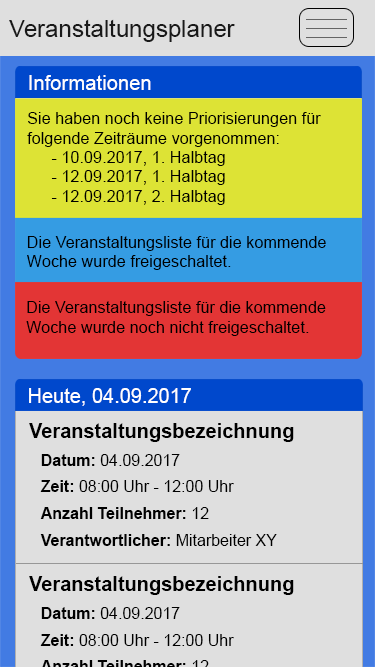
<style>
.page{position:relative;width:375px;height:667px;background:#dfdfdf}
.page>*{position:absolute;margin:0}
.t1{font:24px "ArialMT";color:#191919}
.t2{font:20.3px "ArialMT";color:#ffffff}
.t3{font:16.2px "ArialMT";color:#000000}
.t4{font:20px "ArialMT";color:#ffffff}
.t5{font:20px "Arial-BoldMT";color:#000000}
.t6{font:16px/26.7px "ArialMT";color:#000000}
.t7{font:16px/26.7px "Arial-BoldMT";color:#000000}
</style>
<div class="page">
<p class="t1" style="left:9px;top:19px;width:226px;height:23px">Veranstaltungsplaner</p>
<p class="t2" style="left:29px;top:75px;width:122px;height:15px">Informationen</p>
<p class="t3" style="left:27px;top:112px;width:294px;height:93px">Sie haben noch keine Priorisierungen für <br>folgende Zeiträume vorgenommen:<br> - 10.09.2017, 1. Halbtag<br> - 12.09.2017, 1. Halbtag<br> - 12.09.2017, 2. Halbtag</p>
<p class="t3" style="left:27px;top:236px;width:299px;height:34px">Die Veranstaltungsliste für die kommende <br>Woche wurde freigeschaltet.</p>
<p class="t3" style="left:26px;top:301px;width:300px;height:35px">Die Veranstaltungsliste für die kommende <br>Woche wurde noch nicht freigeschaltet.</p>
<p class="t4" style="left:29px;top:388px;width:162px;height:18px">Heute, 04.09.2017</p>
<p class="t5" style="left:29px;top:423px;width:265px;height:19px">Veranstaltungsbezeichnung</p>
<p class="t6" style="left:40px;top:454px;width:237px;height:92px"><span class="t7">Datum: </span>04.09.2017<br><span class="t7">Zeit: </span>08:00 Uhr - 12:00 Uhr<br><span class="t7">Anzahl Teilnehmer: </span>12<br><span class="t7">Verantwortlicher: </span>Mitarbeiter XY</p>
<p class="t5" style="left:29px;top:576px;width:265px;height:19px">Veranstaltungsbezeichnung</p>
</div>
